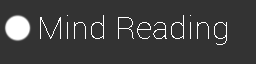
<style>
.page{position:relative;width:256px;height:64px;background:#333333}
.page>*{position:absolute;margin:0}
.t1{font:32px "Roboto-Thin";color:#ffffff}
</style>
<div class="page">
<p class="t1" style="left:40px;top:15px;width:187px;height:30px">Mind Reading</p>
</div>
